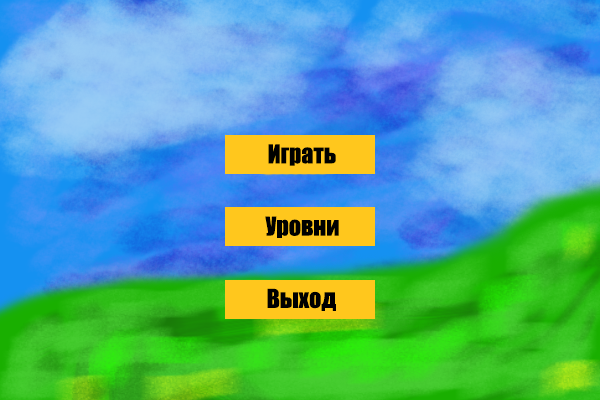
<style>
.page{position:relative;width:600px;height:400px}
.page>*{position:absolute;margin:0}
.t1{font:24px "Impact";color:#000100}
.t2{font:24px "Impact";color:#000000}
</style>
<div class="page">
<p class="t1" style="left:268px;top:144px;width:68px;height:22px">Играть</p>
<p class="t2" style="left:265px;top:216px;width:74px;height:22px">Уровни</p>
<p class="t2" style="left:267px;top:288px;width:69px;height:23px">Выход</p>
</div>
